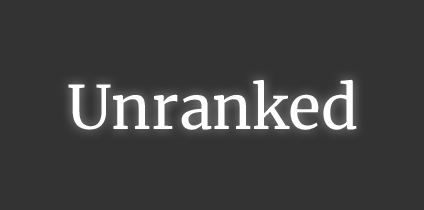
<style>
.page{position:relative;width:424px;height:210px;background:#333333}
.page>*{position:absolute;margin:0}
.t1{font:60px "Merriweather-Regular";color:#ffffff}
</style>
<div class="page">
<p class="t1" style="left:68px;top:79px;width:289px;height:51px">Unranked</p>
</div>
